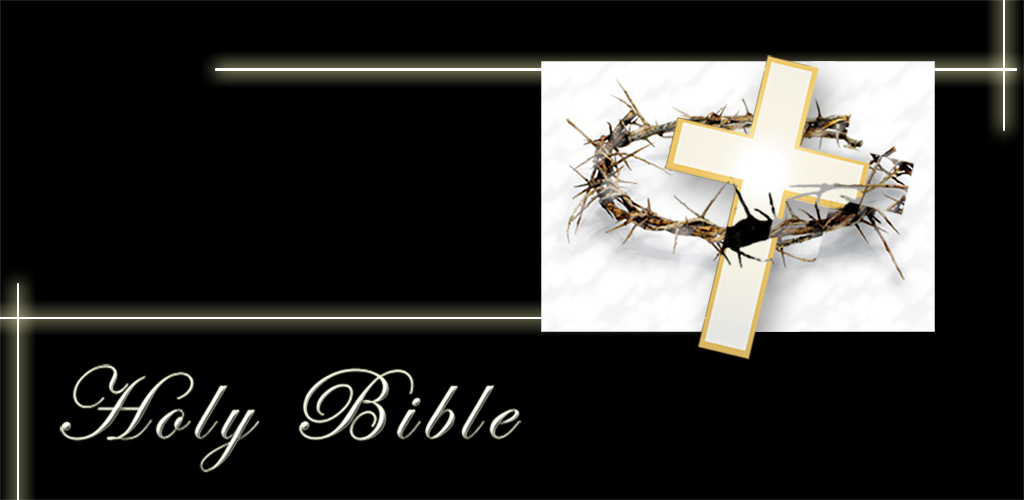
<style>
.page{position:relative;width:1024px;height:500px;background:#000000}
.page>*{position:absolute;margin:0}
.t1{font:102.5px "EdwardianScriptITC";letter-spacing:0.1em}
</style>
<div class="page">
<p class="t1" style="left:60px;top:364px;width:461px;height:108px">Holy Bible</p>
</div>
